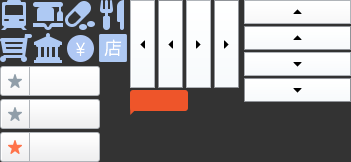
<style>
.page{position:relative;width:351px;height:162px;background:#333333}
.page>*{position:absolute;margin:0}
.t1{font:16.9px "MicrosoftYaHeiLight";color:#ffffff;text-transform:uppercase}
.t2{font:17px "MicrosoftYaHeiLight";color:#ffffff;text-transform:uppercase}
</style>
<div class="page">
<p class="t1" style="left:104px;top:39px;width:18px;height:17px">店</p>
<p class="t2" style="left:76px;top:42px;width:9px;height:14px">￥</p>
</div>
